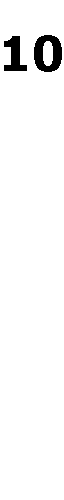
<style>
.page{position:relative;width:64px;height:500px;background:#ffffff}
.page>*{position:absolute;margin:0}
.t1{font:48px "Verdana-Bold";color:#000000}
</style>
<div class="page">
<p class="t1" style="left:4px;top:35px;width:58px;height:37px">10</p>
</div>
